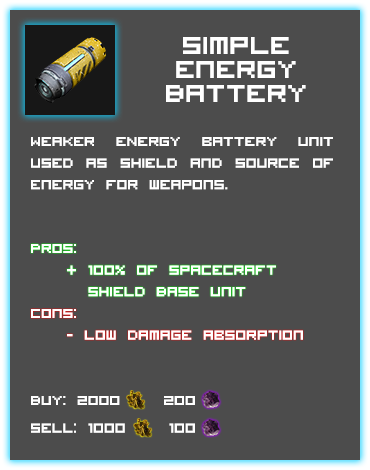
<style>
.page{position:relative;width:370px;height:470px;background:#4c4c4c}
.page>*{position:absolute;margin:0}
.t1{font:34px/12px "VisitorTT1BRK";color:#ffffff}
.t2{font:18px "VisitorTT1BRK";color:#ffffff}
</style>
<div class="page">
<p class="t1" style="left:166px;top:37px;width:140px;height:65px;text-align:center">Simple <br><br>Energy <br><br>Battery</p>
<p class="t2" style="left:31px;top:137px;width:302px;height:53px;text-align:justify">Weaker ENergy battery unit used as shield and source of energy for weapons.</p>
<p class="t2" style="left:31px;top:244px;width:245px;height:53px;text-align:justify">Pros:<br> + 100% of spacecraft              Shield Base unit</p>
<p class="t2" style="left:31px;top:309px;width:272px;height:31px;text-align:justify">Cons:<br> - Low damage absorption</p>
<p class="t2" style="left:31px;top:396px;width:164px;height:37px">Buy: 2000    200<br><br>Sell: 1000    100</p>
</div>
